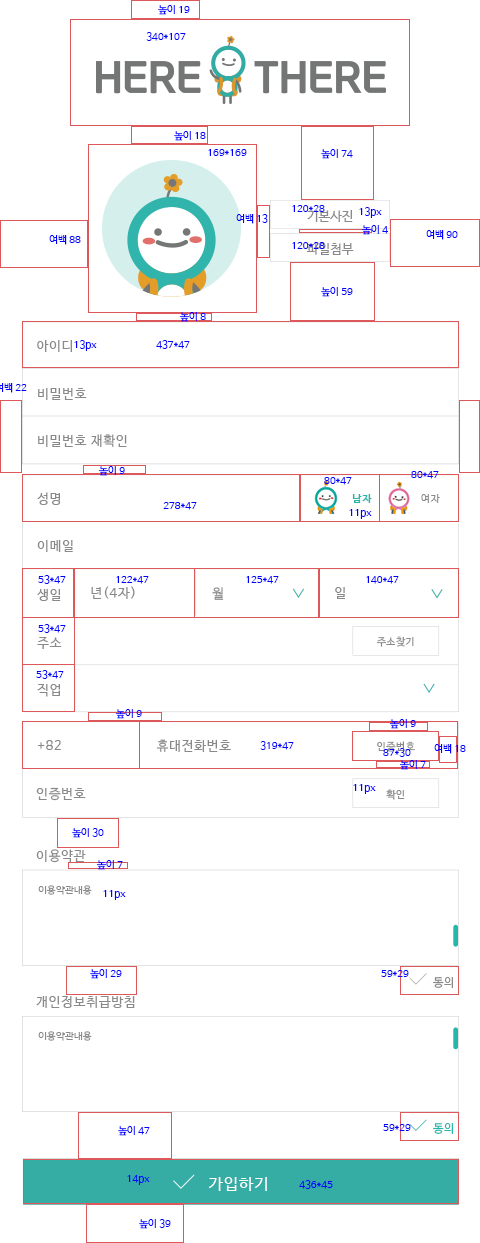
<style>
.page{position:relative;width:480px;height:1243px;background:#ffffff}
.page>*{position:absolute;margin:0}
.t1{font:10px "NanumBarunGothic";color:#0000ff}
.t2{font:12.6px "NanumBarunGothic";letter-spacing:0.025em;color:#898989}
.t3{font:13.3px "NanumBarunGothic";letter-spacing:0.05em;color:#898989}
.t4{font:10.4px "NanumBarunGothicBold";letter-spacing:0.05em;color:#25b7aa}
.t5{font:10.4px "NanumBarunGothic";letter-spacing:0.05em;color:#898989}
.t6{font:10.4px "NanumBarunGothic";letter-spacing:0.025em;color:#898989}
.t7{font:9.5px "NanumBarunGothic";letter-spacing:0.05em;color:#898989}
.t8{font:11.4px "NanumBarunGothic";letter-spacing:0.05em;color:#898989}
.t9{font:11.4px "NanumBarunGothic";letter-spacing:0.05em;color:#25b7aa}
.t10{font:16.1px "NanumBarunGothic";letter-spacing:0.05em;color:#ffffff}
</style>
<div class="page">
<p class="t1" style="left:158px;top:5px;width:32px;height:10px">높이 19</p>
<p class="t1" style="left:146px;top:32px;width:40px;height:9px">340*107</p>
<p class="t1" style="left:174px;top:131px;width:32px;height:10px">높이 18</p>
<p class="t1" style="left:208px;top:149px;width:39px;height:7px">169*169</p>
<p class="t1" style="left:321px;top:149px;width:32px;height:10px">높이 74</p>
<p class="t1" style="left:292px;top:205px;width:33px;height:7px">120*28</p>
<p class="t1" style="left:359px;top:207px;width:23px;height:11px">13px</p>
<p class="t1" style="left:236px;top:214px;width:32px;height:10px">여백 13</p>
<p class="t2" style="left:307px;top:210px;width:46px;height:12px">기본사진</p>
<p class="t1" style="left:361px;top:225px;width:27px;height:10px">높이 4</p>
<p class="t1" style="left:426px;top:230px;width:32px;height:10px">여백 90</p>
<p class="t1" style="left:49px;top:235px;width:32px;height:10px">여백 88</p>
<p class="t1" style="left:292px;top:242px;width:33px;height:7px">120*28</p>
<p class="t2" style="left:307px;top:242px;width:47px;height:13px">파일첨부</p>
<p class="t1" style="left:321px;top:287px;width:32px;height:10px">높이 59</p>
<p class="t1" style="left:179px;top:312px;width:27px;height:10px">높이 8</p>
<p class="t3" style="left:37px;top:340px;width:35px;height:12px">아이디</p>
<p class="t1" style="left:74px;top:340px;width:23px;height:11px">13px</p>
<p class="t1" style="left:156px;top:340px;width:34px;height:9px">437*47</p>
<p class="t3" style="left:38px;top:388px;width:49px;height:12px">비밀번호</p>
<p class="t3" style="left:38px;top:434px;width:89px;height:13px">비밀번호 재확인</p>
<p class="t1" style="left:98px;top:466px;width:27px;height:10px">높이 9</p>
<p class="t1" style="left:411px;top:471px;width:28px;height:8px">80*47</p>
<p class="t1" style="left:324px;top:477px;width:28px;height:8px">80*47</p>
<p class="t3" style="left:37px;top:492px;width:24px;height:13px">성명</p>
<p class="t4" style="left:352px;top:494px;width:20px;height:9px">남자</p>
<p class="t5" style="left:421px;top:494px;width:19px;height:9px">여자</p>
<p class="t1" style="left:163px;top:502px;width:34px;height:8px">278*47</p>
<p class="t1" style="left:349px;top:509px;width:23px;height:10px">11px</p>
<p class="t3" style="left:37px;top:540px;width:36px;height:12px">이메일</p>
<p class="t1" style="left:38px;top:575px;width:28px;height:9px">53*47</p>
<p class="t1" style="left:116px;top:576px;width:33px;height:8px">122*47</p>
<p class="t1" style="left:246px;top:576px;width:33px;height:8px">125*47</p>
<p class="t1" style="left:366px;top:576px;width:33px;height:8px">140*47</p>
<p class="t3" style="left:37px;top:589px;width:24px;height:12px">생일</p>
<p class="t3" style="left:91px;top:586px;width:44px;height:13px">년(4자)</p>
<p class="t3" style="left:212px;top:587px;width:12px;height:13px">월</p>
<p class="t3" style="left:335px;top:587px;width:10px;height:12px">일</p>
<p class="t1" style="left:38px;top:624px;width:28px;height:9px">53*47</p>
<p class="t3" style="left:37px;top:637px;width:25px;height:12px">주소</p>
<p class="t6" style="left:376px;top:636px;width:38px;height:11px">주소찾기</p>
<p class="t1" style="left:36px;top:670px;width:28px;height:9px">53*47</p>
<p class="t3" style="left:37px;top:684px;width:23px;height:13px">직업</p>
<p class="t1" style="left:115px;top:709px;width:27px;height:10px">높이 9</p>
<p class="t1" style="left:389px;top:719px;width:27px;height:10px">높이 9</p>
<p class="t3" style="left:37px;top:740px;width:24px;height:10px">+82</p>
<p class="t3" style="left:156px;top:739px;width:75px;height:13px">휴대전화번호</p>
<p class="t1" style="left:260px;top:741px;width:34px;height:9px">319*47</p>
<p class="t6" style="left:377px;top:741px;width:38px;height:11px">인증번호</p>
<p class="t6" style="left:377px;top:741px;width:38px;height:11px">인증번호</p>
<p class="t1" style="left:383px;top:748px;width:28px;height:9px">87*30</p>
<p class="t1" style="left:434px;top:744px;width:32px;height:10px">여백 18</p>
<p class="t1" style="left:399px;top:760px;width:27px;height:10px">높이 7</p>
<p class="t1" style="left:353px;top:784px;width:23px;height:10px">11px</p>
<p class="t3" style="left:36px;top:787px;width:50px;height:14px">인증번호</p>
<p class="t6" style="left:386px;top:789px;width:19px;height:11px">확인</p>
<p class="t1" style="left:72px;top:828px;width:32px;height:10px">높이 30</p>
<p class="t3" style="left:36px;top:849px;width:50px;height:14px">이용약관</p>
<p class="t1" style="left:96px;top:860px;width:27px;height:10px">높이 7</p>
<p class="t7" style="left:38px;top:885px;width:54px;height:10px">이용약관내용</p>
<p class="t1" style="left:103px;top:890px;width:23px;height:10px">11px</p>
<p class="t1" style="left:90px;top:969px;width:32px;height:10px">높이 29</p>
<p class="t1" style="left:381px;top:970px;width:28px;height:7px">59*29</p>
<p class="t8" style="left:433px;top:977px;width:20px;height:11px">동의</p>
<p class="t3" style="left:36px;top:996px;width:99px;height:12px">개인정보취급방침</p>
<p class="t7" style="left:38px;top:1031px;width:54px;height:10px">이용약관내용</p>
<p class="t1" style="left:118px;top:1126px;width:32px;height:10px">높이 47</p>
<p class="t1" style="left:383px;top:1124px;width:28px;height:7px">59*29</p>
<p class="t9" style="left:433px;top:1123px;width:20px;height:11px">동의</p>
<p class="t1" style="left:127px;top:1175px;width:23px;height:10px">14px</p>
<p class="t10" style="left:208px;top:1177px;width:59px;height:14px">가입하기</p>
<p class="t1" style="left:299px;top:1180px;width:34px;height:9px">436*45</p>
<p class="t1" style="left:139px;top:1219px;width:32px;height:10px">높이 39</p>
</div>
